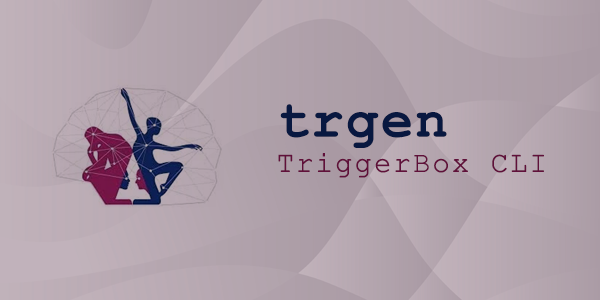
<style>
.page{position:relative;width:600px;height:300px}
.page>*{position:absolute;margin:0}
.t1{font:29.2px "CourierNewPSMT";letter-spacing:0.04em;color:#60103a;font-weight:bold}
.t2{font:54.2px "CourierNewPS-BoldMT";letter-spacing:0.04em;color:#081840}
</style>
<div class="page">
<p class="t1" style="left:278px;top:104px;width:266px;height:74px"><span class="t2">trgen<br></span>TriggerBox CLI</p>
</div>
